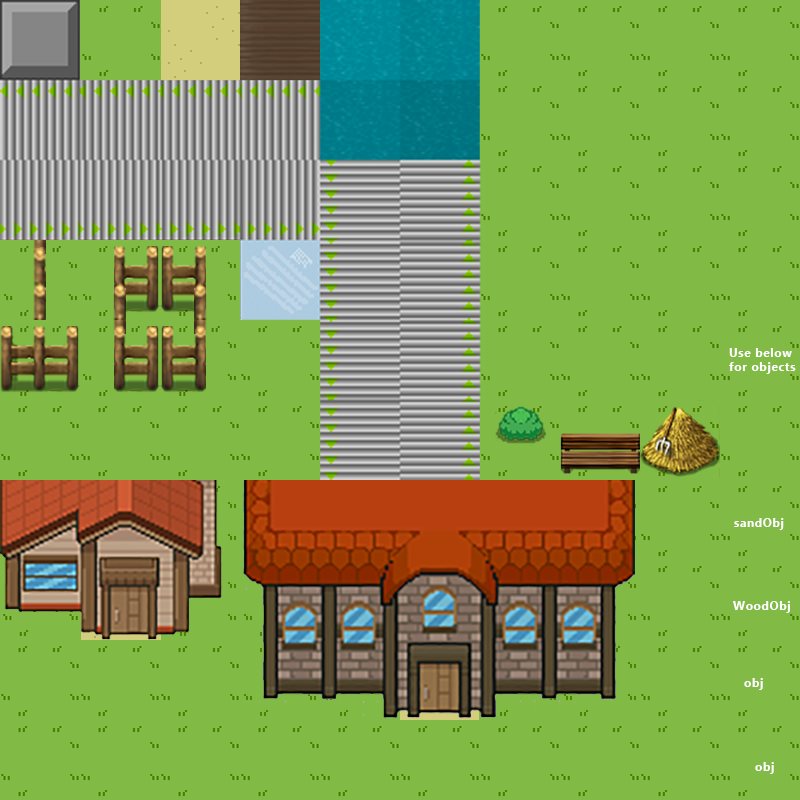
<style>
.page{position:relative;width:800px;height:800px;background:#81ba44}
.page>*{position:absolute;margin:0}
.t1{font:12px "MicrosoftTaiLe-Bold";letter-spacing:0.05em;color:#ffffff}
</style>
<div class="page">
<p class="t1" style="left:729px;top:348px;width:67px;height:26px">Use below<br>for objects</p>
<p class="t1" style="left:734px;top:518px;width:50px;height:12px">sandObj</p>
<p class="t1" style="left:733px;top:601px;width:57px;height:12px">WoodObj</p>
<p class="t1" style="left:744px;top:678px;width:19px;height:12px">obj</p>
<p class="t1" style="left:755px;top:762px;width:19px;height:12px">obj</p>
</div>
